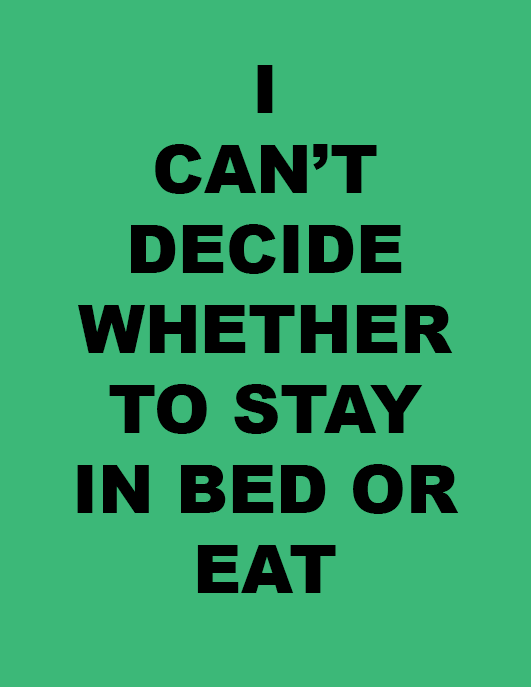
<style>
.page{position:relative;width:531px;height:687px;background:#3cb878}
.page>*{position:absolute;margin:0}
.t1{font:66.7px "Arial-Black";color:#000000}
</style>
<div class="page">
<p class="t1" style="left:77px;top:65px;width:382px;height:528px;text-align:center">I<br>CAN’T<br>DECIDE WHETHER TO STAY <br>IN BED OR <br>EAT</p>
</div>
